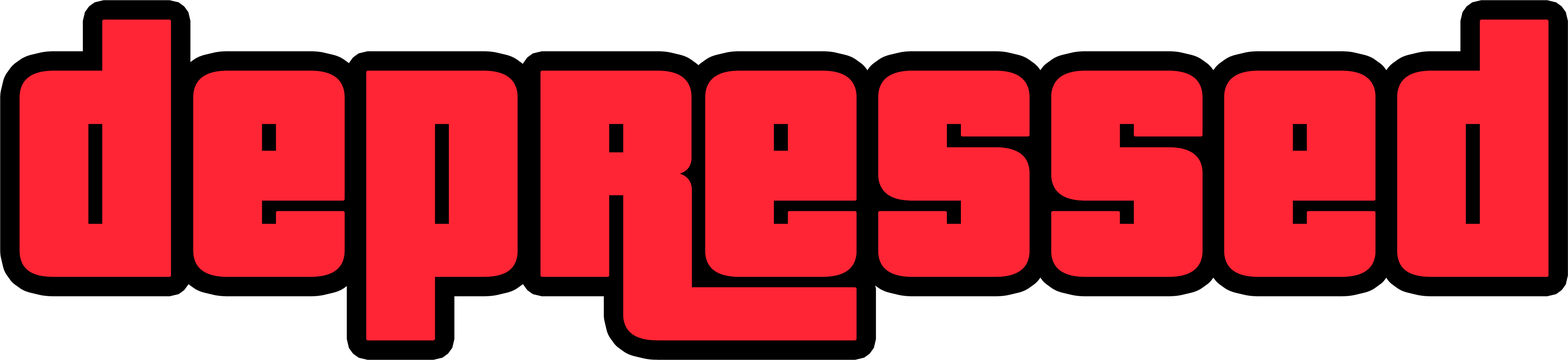
<style>
.page{position:relative;width:1568px;height:360px;background:#ff2535}
.page>*{position:absolute;margin:0}
.t1{font:319.2px "PricedownBl-Regular";color:#ff2535;font-weight:bold}
</style>
<div class="page">
<p class="t1" style="left:19px;top:19px;width:1530px;height:322px">depressed</p>
</div>
